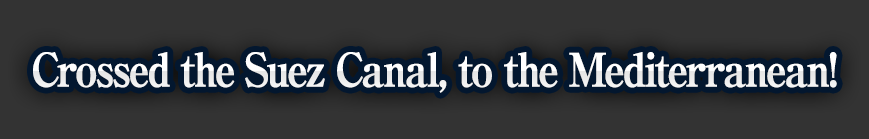
<style>
.page{position:relative;width:869px;height:139px;background:#333333}
.page>*{position:absolute;margin:0}
.t1{font:46px "RyuminPro-ExBold";letter-spacing:-0.08em;color:#ffffff;font-weight:bold;scale:0.9 1}
</style>
<div class="page">
<p class="t1" style="left:33px;top:52px;width:804px;height:41px">Crossed the Suez Canal, to the Mediterranean!</p>
</div>
